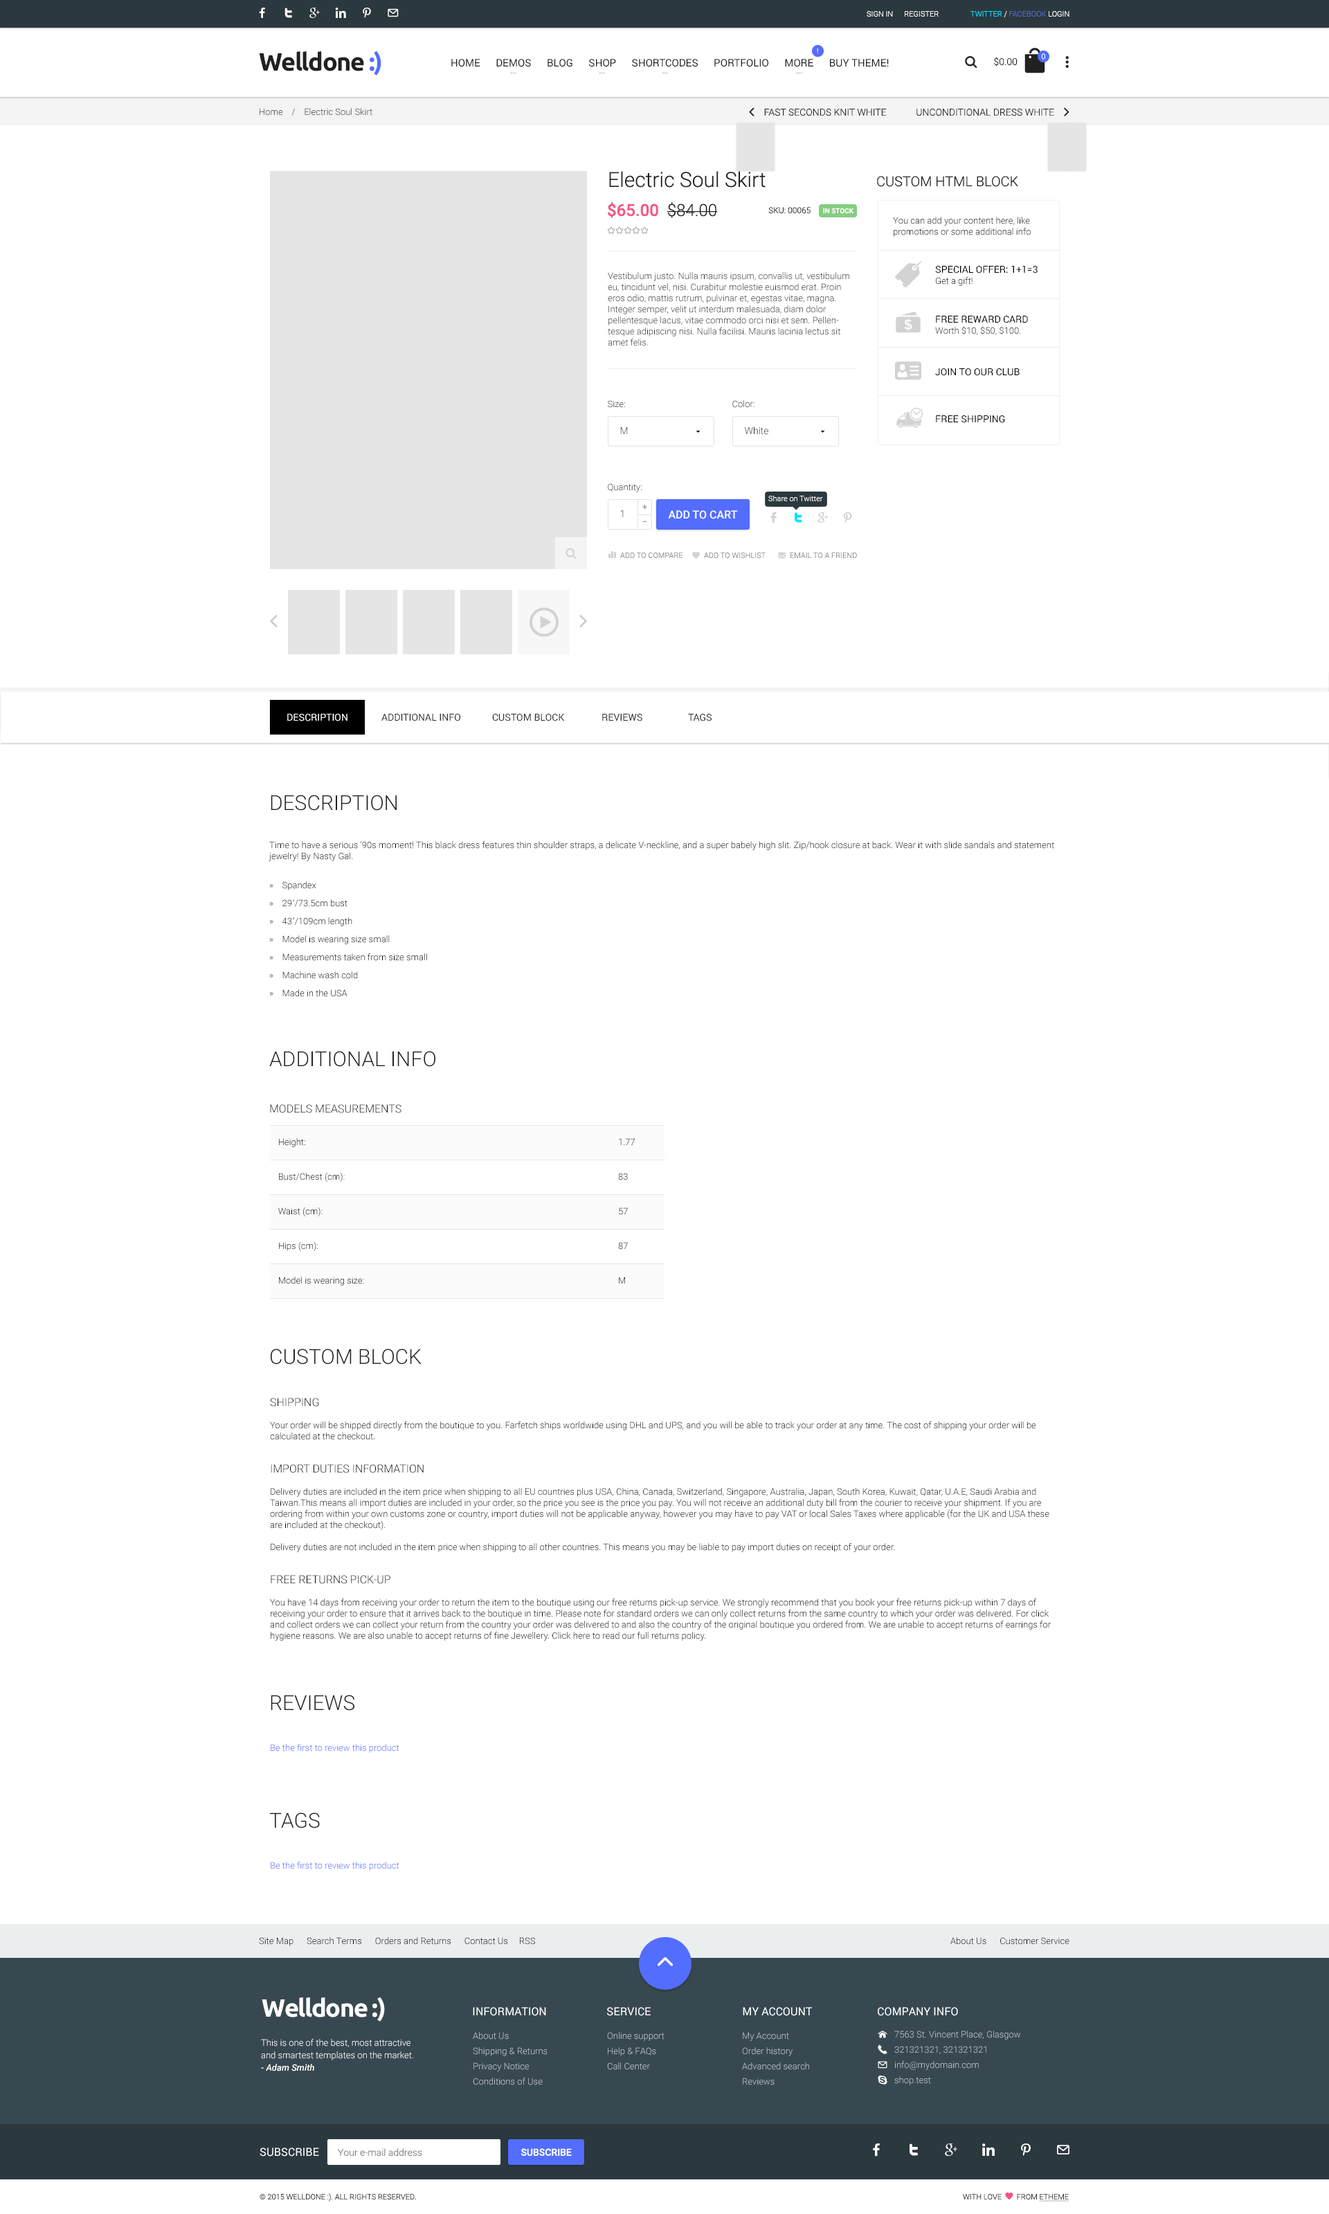
<style>
.page{position:relative;width:1329px;height:2214px;background:#ffffff}
.page>*{position:absolute;margin:0}
.t1{font:7.6px "Roboto-Light";color:#ffffff}
.t2{font:7.6px "Roboto-Light";color:#526ac4}
.t3{font:7.6px "Roboto-Light";color:#00e4ff}
.t4{font:24.9px "Ubuntu-Bold";letter-spacing:-0.04em;color:#212121}
.t5{font:24.9px "Ubuntu-Bold";letter-spacing:-0.04em;color:#536dfe}
.t6{font:6.9px "Roboto-Regular"}
.t7{font:10.4px "Roboto-Regular";color:#212121}
.t8{font:9.7px "Roboto-Light";color:#212121}
.t9{font:9px "Roboto-Light";color:#2b2b2b}
.t10{font:20.8px "Roboto-Light";color:#212121}
.t11{font:13.8px "Roboto-Light";color:#212121}
.t12{font:16.6px "Roboto-Medium";color:#f55582}
.t13{font:16.6px "Roboto-Light";color:#212121}
.t14{font:8.3px "Roboto-Light";color:#212121;text-transform:uppercase}
.t15{font:6.9px "Roboto-Medium";color:#ffffff;text-transform:uppercase}
.t16{font:9px/11.4px "Roboto-Light";color:#000000}
.t17{font:9px/11.1px "Roboto-Light";color:#000000}
.t18{font:9.7px/11.1px "Roboto-Regular";color:#000000;text-transform:uppercase}
.t19{font:9.7px/16.6px "Roboto-Regular";color:#000000;text-transform:uppercase}
.t20{font:9.7px/8.3px "Roboto-Regular";color:#000000;text-transform:uppercase}
.t21{font:9.7px/18px "Roboto-Regular";color:#000000;text-transform:uppercase}
.t22{font:9px/11.1px "Roboto-Light";color:#2b2b2b}
.t23{font:9px "Roboto-Light"}
.t24{font:9.7px "Roboto-Light";color:#2b2b2b}
.t25{font:7.6px "Roboto-Light";color:#f4f4f4}
.t26{font:8.3px "MyriadPro-Regular";color:#7a7a7a}
.t27{font:9.7px "Roboto-Light"}
.t28{font:8.3px "MyriadPro-Regular"}
.t29{font:11.1px "Roboto-Medium";color:#ffffff;text-transform:uppercase}
.t30{font:7.6px "Roboto-Light";color:#919191;text-transform:uppercase}
.t31{font:9.7px "Roboto-Regular";color:#ffffff;text-transform:uppercase}
.t32{font:9.7px "Roboto-Regular";color:#2b2b2b;text-transform:uppercase}
.t33{font:20.8px "Roboto-Light";color:#212121;text-transform:uppercase}
.t34{font:9px/18px "Roboto-Light";color:#000000}
.t35{font:9px/34.6px "Roboto-Light";color:#000000}
.t36{font:11.1px/11.1px "Roboto-Light";color:#000000;text-transform:uppercase}
.t37{font:9px/21.5px "Roboto-Light";color:#000000}
.t38{font:9px "Roboto-Light";color:#536dfe}
.t39{font:9px "Roboto-Light";color:#000000}
.t40{font:24.9px "Ubuntu-Bold";letter-spacing:-0.04em;color:#ffffff}
.t41{font:11.1px "Roboto-Regular";color:#ffffff;text-transform:uppercase}
.t42{font:9px/15.2px "Roboto-Light";color:#bbc2c6}
.t43{font:9px/12.5px "Roboto-Light";color:#ffffff}
.t44{font:9px/12.5px "Roboto-MediumItalic";color:#ffffff}
.t45{font:9.7px "Roboto-Light";color:#848484}
.t46{font:9.7px "Roboto-Medium";color:#ffffff;text-transform:uppercase}
.t47{font:7.6px "Roboto-Light";color:#2b2b2b;text-transform:uppercase}
</style>
<div class="page">
<p class="t1" style="left:867px;top:11px;width:72px;height:6px">SIGN IN      REGISTER</p>
<p class="t2" style="left:971px;top:11px;width:99px;height:6px"><span class="t3">TWITTER </span><span class="t1">/ </span>FACEBOOK <span class="t1">LOGIN</span></p>
<p class="t4" style="left:259px;top:51px;width:122px;height:24px">Welldone <span class="t5">:)</span></p>
<p class="t6" style="left:817px;top:48px;width:1px;height:5px">!</p>
<p class="t1" style="left:1041px;top:53px;width:4px;height:7px">0</p>
<p class="t7" style="left:451px;top:59px;width:438px;height:8px">HOME      DEMOS      BLOG      SHOP      SHORTCODES      PORTFOLIO      MORE      BUY THEME!</p>
<p class="t8" style="left:994px;top:57px;width:24px;height:9px">$0.00</p>
<p class="t9" style="left:260px;top:108px;width:112px;height:8px">Home    /    Electric Soul Skirt</p>
<p class="t10" style="left:609px;top:171px;width:157px;height:17px">Electric Soul Skirt</p>
<p class="t11" style="left:877px;top:176px;width:141px;height:11px">CUSTOM HTML BLOCK</p>
<p class="t12" style="left:608px;top:202px;width:110px;height:16px">$65.00  <span class="t13">$84.00</span></p>
<p class="t14" style="left:768px;top:207px;width:86px;height:7px">SKU: 00065      <span class="t15">In Stock</span></p>
<p class="t16" style="left:893px;top:217px;width:138px;height:20px">You can add your content here, like promotions or some additional info</p>
<p class="t17" style="left:935px;top:266px;width:103px;height:157px"><span class="t18">Special offer: 1+1=3<br></span>Get a gift!<br><br><br><span class="t19">Free Reward Card<br></span>Worth $10, $50, $100. <br><br><br><br><span class="t20">Join to our Club<br><br><br><br></span><span class="t21">Free shipping</span></p>
<p class="t22" style="left:608px;top:272px;width:241px;height:74px">Vestibulum justo. Nulla mauris ipsum, convallis ut, vestibulum eu, tincidunt vel, nisi. Curabitur molestie euismod erat. Proin eros odio, mattis rutrum, pulvinar et, egestas vitae, magna. Integer semper, velit ut interdum malesuada, diam dolor pellentesque lacus, vitae commodo orci nisi et sem. Pellentesque adipiscing nisi. Nulla facilisi. Mauris lacinia lectus sit amet felis.</p>
<p class="t23" style="left:608px;top:400px;width:17px;height:8px">Size:</p>
<p class="t23" style="left:732px;top:400px;width:23px;height:8px">Color:</p>
<p class="t24" style="left:620px;top:427px;width:8px;height:7px">M</p>
<p class="t24" style="left:745px;top:426px;width:23px;height:9px">White</p>
<p class="t23" style="left:608px;top:483px;width:34px;height:9px">Quantity:</p>
<p class="t25" style="left:768px;top:496px;width:55px;height:5px">Share on Twitter</p>
<p class="t26" style="left:642px;top:505px;width:5px;height:5px">+</p>
<p class="t27" style="left:620px;top:510px;width:4px;height:7px">1</p>
<p class="t28" style="left:642px;top:521px;width:5px;height:1px">–</p>
<p class="t29" style="left:668px;top:510px;width:70px;height:9px">ADD TO CART</p>
<p class="t30" style="left:620px;top:552px;width:63px;height:7px">Add to compare</p>
<p class="t30" style="left:704px;top:552px;width:62px;height:7px">add to wishlist</p>
<p class="t30" style="left:790px;top:552px;width:67px;height:7px">Email to a friend</p>
<p class="t31" style="left:287px;top:714px;width:61px;height:7px">description</p>
<p class="t32" style="left:381px;top:714px;width:79px;height:7px">Additional Info</p>
<p class="t32" style="left:492px;top:714px;width:73px;height:7px">CUSTOM BLOCK</p>
<p class="t32" style="left:602px;top:714px;width:40px;height:7px">Reviews</p>
<p class="t32" style="left:688px;top:714px;width:24px;height:7px">TAGS</p>
<p class="t33" style="left:271px;top:795px;width:126px;height:16px">Description</p>
<p class="t17" style="left:269px;top:841px;width:785px;height:156px">Time to have a serious '90s moment! This black dress features thin shoulder straps, a delicate V-neckline, and a super babely high slit. Zip/hook closure at back. Wear it with slide sandals and statement jewelry! By Nasty Gal.<br><br><span class="t34">»    </span>Spandex<br><span class="t34">»    </span>29"/73.5cm bust <br><span class="t34">»    </span>43"/109cm length <br><span class="t34">»    </span>Model is wearing size small <br><span class="t34">»    </span>Measurements taken from size small <br><span class="t34">»    </span>Machine wash cold <br><span class="t34">»    </span>Made in the USA</p>
<p class="t33" style="left:269px;top:1051px;width:166px;height:16px">Additional info</p>
<p class="t35" style="left:270px;top:1104px;width:365px;height:182px"><span class="t36">Models Measurements<br><br></span><span class="t37">    Height:             1.77<br></span>    Bust/Chest (cm):           83<br>    Waist (cm):            57<br>    Hips (cm):             87<br>    Model is wearing size:           M</p>
<p class="t33" style="left:271px;top:1349px;width:151px;height:16px">Custom Block</p>
<p class="t17" style="left:270px;top:1398px;width:781px;height:243px"><span class="t36">Shipping<br></span><br>Your order will be shipped directly from the boutique to you. Farfetch ships worldwide using DHL and UPS, and you will be able to track your order at any time. The cost of shipping your order will be calculated at the checkout.<br><br><br><span class="t36">Import duties information<br></span><br>Delivery duties are included in the item price when shipping to all EU countries plus USA, China, Canada, Switzerland, Singapore, Australia, Japan, South Korea, Kuwait, Qatar, U.A.E, Saudi Arabia and Taiwan.This means all import duties are included in your order, so the price you see is the price you pay. You will not receive an additional duty bill from the courier to receive your shipment. If you are ordering from within your own customs zone or country, import duties will not be applicable anyway, however you may have to pay VAT or local Sales Taxes where applicable (for the UK and USA these are included at the checkout).<br><br>Delivery duties are not included in the item price when shipping to all other countries. This means you may be liable to pay import duties on receipt of your order.<br><br><br><span class="t36">Free returns pick-up<br></span><br>You have 14 days from receiving your order to return the item to the boutique using our free returns pick-up service. We strongly recommend that you book your free returns pick-up within 7 days of receiving your order to ensure that it arrives back to the boutique in time. Please note for standard orders we can only collect returns from the same country to which your order was delivered. For click and collect orders we can collect your return from the country your order was delivered to and also the country of the original boutique you ordered from. We are unable to accept returns of earrings for hygiene reasons. We are also unable to accept returns of fine Jewellery. Click here to read our full returns policy.</p>
<p class="t33" style="left:271px;top:1695px;width:83px;height:16px">Reviews</p>
<p class="t38" style="left:271px;top:1744px;width:128px;height:9px">Be the first to review this product</p>
<p class="t33" style="left:269px;top:1812px;width:51px;height:16px">Tags</p>
<p class="t38" style="left:271px;top:1862px;width:128px;height:9px">Be the first to review this product</p>
<p class="t39" style="left:259px;top:1937px;width:276px;height:9px">Site Map      Search Terms      Orders and Returns      Contact Us     RSS</p>
<p class="t39" style="left:951px;top:1937px;width:119px;height:8px">About Us      Customer Service</p>
<p class="t40" style="left:262px;top:1997px;width:123px;height:25px">Welldone :)</p>
<p class="t41" style="left:473px;top:2007px;width:73px;height:9px">Information</p>
<p class="t41" style="left:607px;top:2007px;width:44px;height:9px">service</p>
<p class="t41" style="left:743px;top:2007px;width:69px;height:9px">My account</p>
<p class="t41" style="left:878px;top:2007px;width:80px;height:9px">Company Info</p>
<p class="t42" style="left:473px;top:2032px;width:75px;height:53px">About Us<br>Shipping &amp; Returns<br>Privacy Notice<br>Conditions of Use</p>
<p class="t42" style="left:607px;top:2032px;width:58px;height:38px">Online support<br>Help &amp; FAQs<br>Call Center</p>
<p class="t42" style="left:742px;top:2032px;width:67px;height:53px">My Account<br>Order history<br>Advanced search<br>Reviews</p>
<p class="t42" style="left:894px;top:2031px;width:126px;height:54px">7563 St. Vincent Place, Glasgow<br>321321321, 321321321<br>info@mydomain.com<br>shop.test</p>
<p class="t43" style="left:261px;top:2039px;width:152px;height:32px">This is one of the best, most attractive and smartest templates on the market. <br><span class="t44">- Adam Smith</span></p>
<p class="t41" style="left:260px;top:2148px;width:59px;height:9px">Subscribe</p>
<p class="t45" style="left:338px;top:2148px;width:84px;height:9px">Your e-mail address</p>
<p class="t46" style="left:521px;top:2148px;width:51px;height:8px">SUBSCRIBE</p>
<p class="t47" style="left:260px;top:2193px;width:156px;height:9px">© 2015 Welldone :). All Rights Reserved.</p>
</div>
